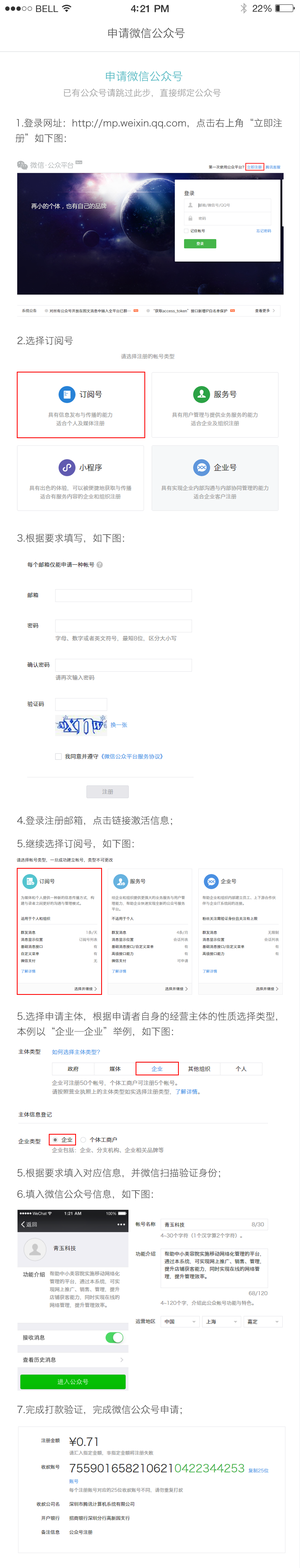
<style>
.page{position:relative;width:300px;height:1568px;background:#ffffff}
.page>*{position:absolute;margin:0}
.t1{font:11.2px "HiraginoSansGB-W3";color:#4d4d4d}
.t2{font:11.2px "HiraginoSansGB-W3";color:#4bb7c1}
.t3{font:8.8px "HiraginoSansGB-W3";color:#999999}
.t4{font:9.6px/15.2px "HiraginoSansGB-W3";color:#4c4c4c}
.t5{font:9.6px "HiraginoSansGB-W3";color:#4c4c4c}
</style>
<div class="page">
<p class="t1" style="left:108px;top:28px;width:77px;height:10px">申请微信公众号</p>
<p class="t2" style="left:106px;top:70px;width:77px;height:12px">申请微信公众号</p>
<p class="t3" style="left:64px;top:89px;width:157px;height:8px">已有公众号请跳过此步，直接绑定公众号</p>
<p class="t4" style="left:16px;top:118px;width:266px;height:25px;text-align:justify">1.登录网址：http://mp.weixin.qq.com，点击右上角“立即注<br>册”如下图：</p>
<p class="t5" style="left:17px;top:336px;width:56px;height:9px">2.选择订阅号</p>
<p class="t5" style="left:17px;top:533px;width:107px;height:10px">3.根据要求填写，如下图：</p>
<p class="t5" style="left:17px;top:816px;width:155px;height:9px">4.登录注册邮箱，点击链接激活信息；</p>
<p class="t5" style="left:17px;top:839px;width:117px;height:10px">5.继续选择订阅号，如下图：</p>
<p class="t4" style="left:17px;top:1012px;width:261px;height:25px;text-align:justify">5.选择申请主体，根据申请者自身的经营主体的性质选择类型，<br>本例以“企业—企业”举例，如下图：</p>
<p class="t5" style="left:17px;top:1168px;width:203px;height:10px">5.根据要求填入对应信息，并微信扫描验证身份；</p>
<p class="t5" style="left:17px;top:1189px;width:136px;height:10px">6.填入微信公众号信息，如下图：</p>
<p class="t5" style="left:17px;top:1405px;width:165px;height:10px">7.完成打款验证，完成微信公众号申请；</p>
</div>
